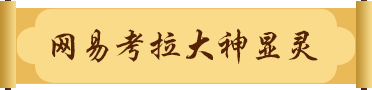
<style>
.page{position:relative;width:372px;height:90px;background:#f9db8a}
.page>*{position:absolute;margin:0}
.t1{font:36.9px "FZXKJW--GB1-0";letter-spacing:-0.075em;color:#572306;text-transform:uppercase}
</style>
<div class="page">
<p class="t1" style="left:51px;top:28px;width:267px;height:36px">网易考拉大神显灵</p>
</div>
